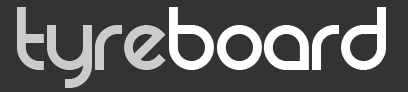
<style>
.page{position:relative;width:408px;height:92px;background:#333333}
.page>*{position:absolute;margin:0}
.t1{font:100px "REZ";color:#ffffff}
.t2{font:100px "REZ";color:#cbcbcb}
</style>
<div class="page">
<p class="t1" style="left:17px;top:7px;width:369px;height:81px"><span class="t2">Tyre</span>Board</p>
</div>
